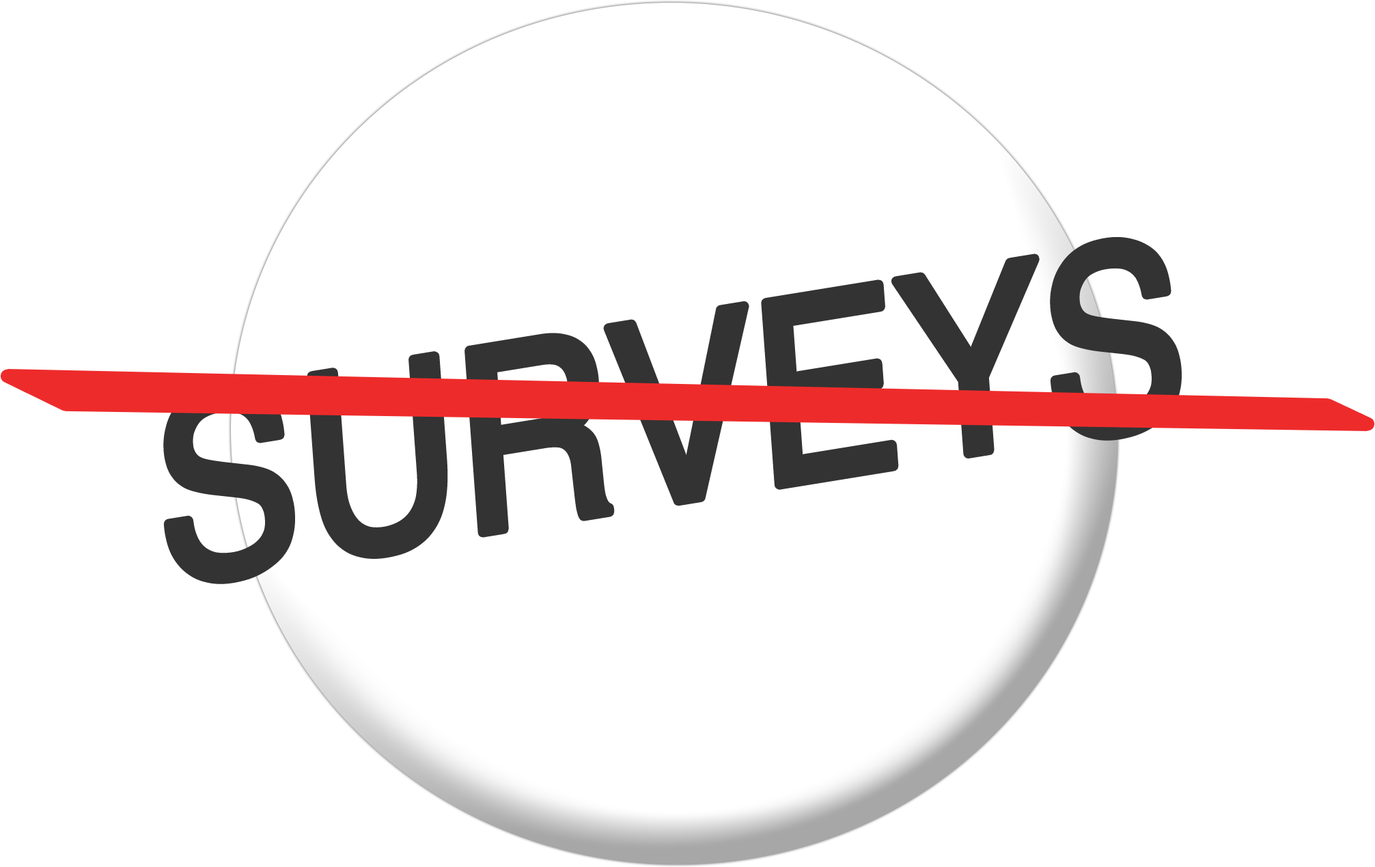
<style>
.page{position:relative;width:1375px;height:867px;background:#ffffff}
.page>*{position:absolute;margin:0}
.t1{font:254.4px "Helvetica";color:#333333;scale:0.86 1}
</style>
<div class="page">
<p class="t1" style="left:168px;top:242px;width:1009px;height:337px;rotate:-9deg">SURVEYS</p>
</div>
